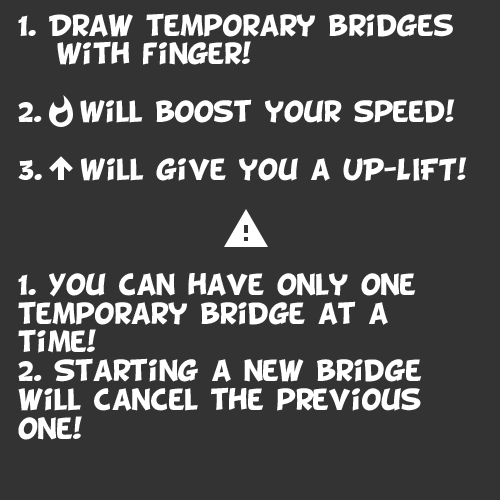
<style>
.page{position:relative;width:500px;height:500px;background:#333333}
.page>*{position:absolute;margin:0}
.t1{font:24px "BDCartoonShout";color:#ffffff}
</style>
<div class="page">
<p class="t1" style="left:18px;top:13px;width:449px;height:427px">1. Draw temporary bridges     With finger!<br><br>2.   Will boost your speed!<br><br>3.   Will give you a UP-LIFT!<br><br><br><br>1. You can have only one temporary bridge at a time!<br>2. Starting a new bridge will cancel the previous one!</p>
</div>
